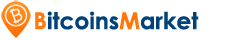
<style>
.page{position:relative;width:240px;height:40px;background:#ffffff}
.page>*{position:absolute;margin:0}
.t1{font:23.3px "CenturyGothic-Bold";color:#00437a}
.t2{font:23.3px "CenturyGothic-Bold";color:#ff790c}
.t3{font:23.3px "CenturyGothic-Bold";color:#ff760a}
</style>
<div class="page">
<p class="t1" style="left:35px;top:11px;width:164px;height:19px"><span class="t2">B</span>itcoins<span class="t3">M</span>arket</p>
</div>
